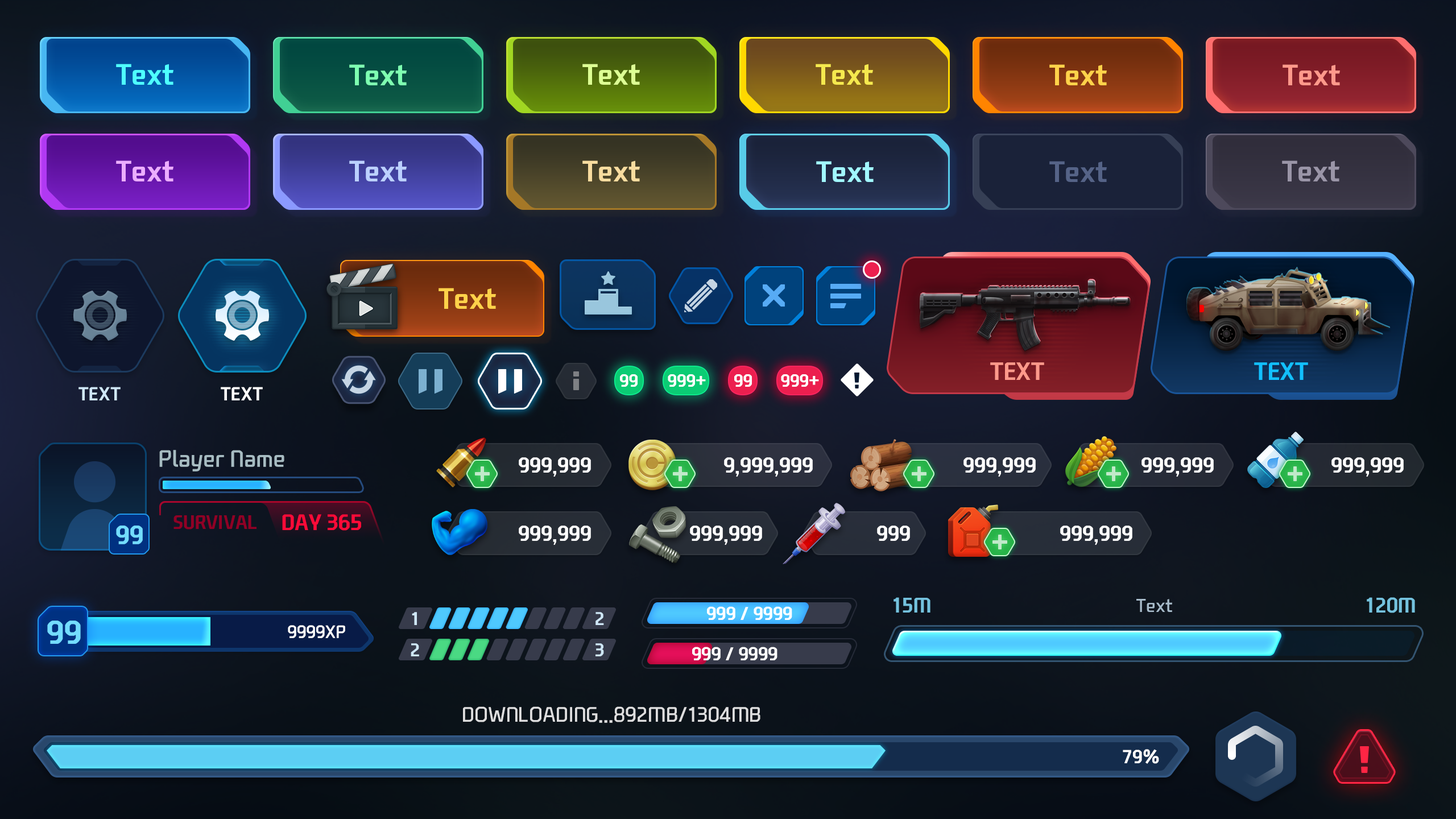
<style>
.page{position:relative;width:1456px;height:819px}
.page>*{position:absolute;margin:0}
.t1{font:28.4px "NEXONFootballGothicB";color:#4efefe}
.t2{font:28.4px "NEXONFootballGothicB";color:#7effb1}
.t3{font:28.4px "NEXONFootballGothicB";color:#ddff94}
.t4{font:28.4px "NEXONFootballGothicB";color:#f5e94e}
.t5{font:28.4px "NEXONFootballGothicB";color:#ffd24a}
.t6{font:28.4px "NEXONFootballGothicB";color:#ff998b}
.t7{font:28.4px "NEXONFootballGothicB";color:#ecaeff}
.t8{font:28.4px "NEXONFootballGothicB";color:#bbd0ff}
.t9{font:28.4px "NEXONFootballGothicB";color:#f8dc9f}
.t10{font:28.4px "NEXONFootballGothicB";color:#a1f7ff}
.t11{font:28.4px "NEXONFootballGothicB";color:#556387}
.t12{font:28.4px "NEXONFootballGothicB";color:#9a95a7}
.t13{font:24px "NEXONFootballGothicB";color:#ff998b;text-transform:uppercase}
.t14{font:24px "NEXONFootballGothicB";color:#12c0ff;text-transform:uppercase}
.t15{font:17.1px "NEXONFootballGothicB";color:#ffffff;text-transform:uppercase}
.t16{font:18.2px "NEXONFootballGothicB";color:#cfe7f7;text-transform:uppercase}
.t17{font:18.2px "NEXONFootballGothicB";color:#ffffff;text-transform:uppercase}
.t18{font:22.7px "NEXONFootballGothicL";color:#a7bcc2}
.t19{font:20.7px "NEXONFootballGothicB";color:#ffffff;text-transform:uppercase}
.t20{font:18.8px "NEXONFootballGothicB";color:#900025;text-transform:uppercase}
.t21{font:21.6px "NEXONFootballGothicB";color:#ff0a38;text-transform:uppercase}
.t22{font:25px "NEXONFootballGothicB";color:#73dcff}
.t23{font:20.7px "NEXONFootballGothicB";color:#ffffff}
.t24{font:20.5px "NEXONFootballGothicB";color:#74c2de}
.t25{font:18.2px "NEXONFootballGothicL";color:#a7bbca}
.t26{font:17.9px "NEXONFootballGothicB";color:#cfe7f7}
.t27{font:17.9px "NEXONFootballGothicB";color:#ffffff}
.t28{font:31.4px "NEXONFootballGothicB";color:#73dcff}
.t29{font:17.1px "NEXONFootballGothicL";color:#ffffff}
.t30{font:20.5px "NEXONFootballGothicL";color:#dededf;text-transform:uppercase}
</style>
<div class="page">
<p class="t1" style="left:116px;top:64px;width:57px;height:21px">Text</p>
<p class="t2" style="left:349px;top:64px;width:58px;height:21px">Text</p>
<p class="t3" style="left:582px;top:64px;width:58px;height:21px">Text</p>
<p class="t4" style="left:816px;top:64px;width:57px;height:21px">Text</p>
<p class="t5" style="left:1049px;top:64px;width:58px;height:21px">Text</p>
<p class="t6" style="left:1283px;top:64px;width:57px;height:21px">Text</p>
<p class="t7" style="left:116px;top:160px;width:57px;height:21px">Text</p>
<p class="t8" style="left:349px;top:160px;width:58px;height:21px">Text</p>
<p class="t9" style="left:582px;top:160px;width:58px;height:21px">Text</p>
<p class="t10" style="left:816px;top:161px;width:58px;height:21px">Text</p>
<p class="t11" style="left:1049px;top:161px;width:58px;height:21px">Text</p>
<p class="t12" style="left:1282px;top:160px;width:57px;height:21px">Text</p>
<p class="t5" style="left:439px;top:288px;width:57px;height:21px">Text</p>
<p class="t13" style="left:990px;top:362px;width:54px;height:18px">Text</p>
<p class="t14" style="left:1254px;top:362px;width:54px;height:18px">Text</p>
<p class="t15" style="left:620px;top:374px;width:18px;height:13px">99</p>
<p class="t15" style="left:668px;top:374px;width:38px;height:13px">999+</p>
<p class="t15" style="left:734px;top:374px;width:18px;height:13px">99</p>
<p class="t15" style="left:781px;top:374px;width:38px;height:13px">999+</p>
<p class="t16" style="left:78px;top:387px;width:43px;height:13px">Text</p>
<p class="t17" style="left:221px;top:387px;width:42px;height:13px">Text</p>
<p class="t18" style="left:159px;top:450px;width:125px;height:21px">Player Name</p>
<p class="t19" style="left:519px;top:457px;width:72px;height:20px">999,999</p>
<p class="t19" style="left:724px;top:457px;width:89px;height:20px">9,999,999</p>
<p class="t19" style="left:963px;top:457px;width:73px;height:20px">999,999</p>
<p class="t19" style="left:1141px;top:457px;width:73px;height:20px">999,999</p>
<p class="t19" style="left:1331px;top:457px;width:73px;height:20px">999,999</p>
<p class="t20" style="left:173px;top:515px;width:84px;height:14px">Survival</p>
<p class="t21" style="left:282px;top:514px;width:79px;height:17px">Day 365</p>
<p class="t22" style="left:116px;top:526px;width:27px;height:18px">99</p>
<p class="t19" style="left:519px;top:526px;width:72px;height:19px">999,999</p>
<p class="t19" style="left:690px;top:526px;width:72px;height:19px">999,999</p>
<p class="t23" style="left:877px;top:526px;width:33px;height:15px">999</p>
<p class="t19" style="left:1060px;top:526px;width:72px;height:19px">999,999</p>
<p class="t24" style="left:893px;top:597px;width:37px;height:16px">15M</p>
<p class="t25" style="left:1136px;top:599px;width:36px;height:13px">Text</p>
<p class="t24" style="left:1367px;top:597px;width:48px;height:16px">120M</p>
<p class="t26" style="left:412px;top:612px;width:5px;height:13px">1</p>
<p class="t26" style="left:595px;top:612px;width:9px;height:13px">2</p>
<p class="t27" style="left:707px;top:606px;width:85px;height:14px">999 / 9999</p>
<p class="t28" style="left:47px;top:620px;width:34px;height:24px">99</p>
<p class="t29" style="left:288px;top:625px;width:57px;height:13px">9999XP</p>
<p class="t26" style="left:411px;top:643px;width:8px;height:13px">2</p>
<p class="t26" style="left:595px;top:643px;width:9px;height:13px">3</p>
<p class="t27" style="left:692px;top:647px;width:85px;height:13px">999 / 9999</p>
<p class="t30" style="left:463px;top:706px;width:297px;height:17px">Downloading...892MB/1304MB</p>
<p class="t17" style="left:1123px;top:749px;width:36px;height:15px">79%</p>
</div>
